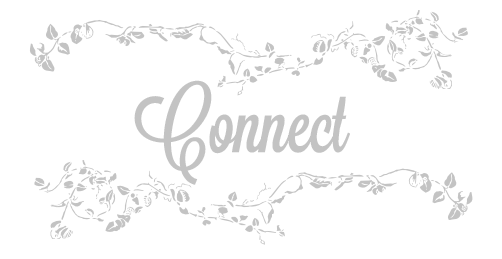
<style>
.page{position:relative;width:502px;height:259px;background:#ffffff}
.page>*{position:absolute;margin:0}
.t1{font:80px "Lavanderia-Sturdy";letter-spacing:-0.01em;color:#c3c3c3}
</style>
<div class="page">
<p class="t1" style="left:134px;top:80px;width:216px;height:105px">Connect</p>
</div>
